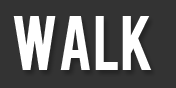
<style>
.page{position:relative;width:176px;height:88px;background:#333333}
.page>*{position:absolute;margin:0}
.t1{font:60px "Bebas";color:#ffffff}
</style>
<div class="page">
<p class="t1" style="left:13px;top:16px;width:139px;height:54px">WALK</p>
</div>
